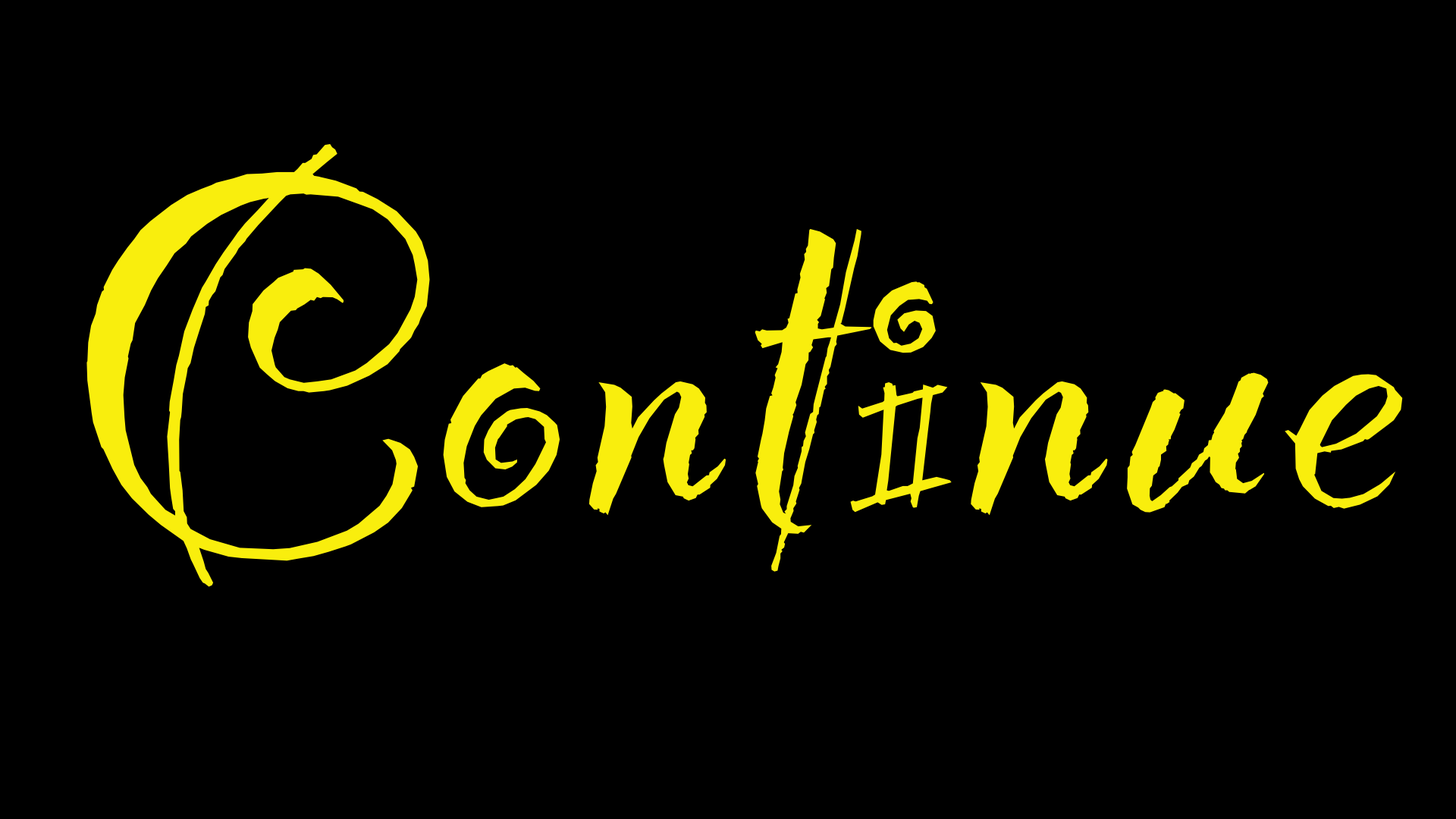
<style>
.page{position:relative;width:1456px;height:819px;background:#000000}
.page>*{position:absolute;margin:0}
.t1{font:585.6px "PartyLetPlain";color:#fbee00}
</style>
<div class="page">
<p class="t1" style="left:0px;top:0px;width:1456px;height:819px">Continue</p>
</div>
